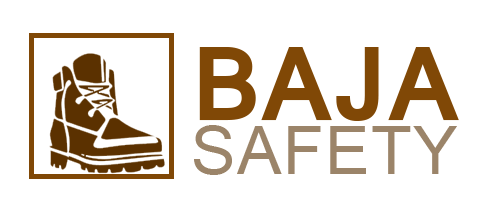
<style>
.page{position:relative;width:500px;height:200px;background:#ffffff}
.page>*{position:absolute;margin:0}
.t1{font:74px/54.3px "Raavi";letter-spacing:0.02em;color:#9b8469}
.t2{font:113px/54.3px "Raavi-Bold";color:#804806}
</style>
<div class="page">
<p class="t1" style="left:194px;top:47px;width:265px;height:128px"><span class="t2">BAJA<br></span>SAFETY</p>
</div>
